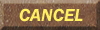
<style>
.page{position:relative;width:100px;height:30px}
.page>*{position:absolute;margin:0}
.t1{font:18px "FranklinGothic-DemiItalic";color:#fff061}
</style>
<div class="page">
<p class="t1" style="left:19px;top:8px;width:64px;height:14px">CANCEL</p>
</div>
